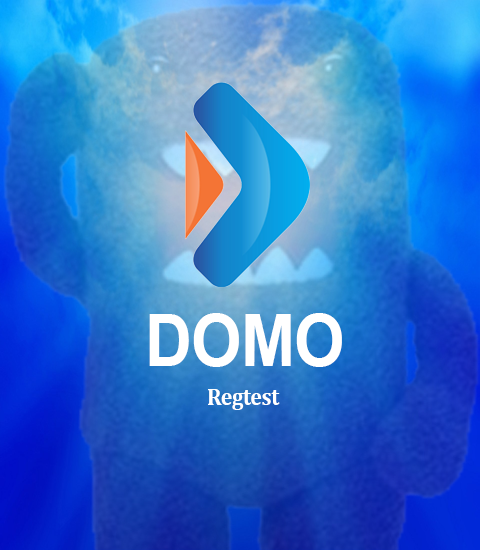
<style>
.page{position:relative;width:480px;height:550px}
.page>*{position:absolute;margin:0}
.t1{font:72px "Arial-BoldMT";letter-spacing:-0.01em;color:#ffffff;scale:0.9 1}
.t2{font:24px "Cambria-Bold";letter-spacing:-0.01em;color:#ffffff;scale:0.9 1}
</style>
<div class="page">
<p class="t1" style="left:149px;top:313px;width:193px;height:54px">DOMO</p>
<p class="t2" style="left:208px;top:389px;width:72px;height:21px">Regtest</p>
</div>
